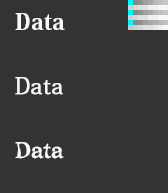
<style>
.page{position:relative;width:168px;height:193px;background:#333333}
.page>*{position:absolute;margin:0}
.t1{font:22px/64px "KozMinPro-Heavy";letter-spacing:0.022em;color:#f8f8f8}
.t2{font:22px/64px "AdobeFangsongStd-Regular";letter-spacing:0.028em;color:#f8f8f8;font-weight:bold}
.t3{font:22px/64px "ComicMysteryStd-DB";letter-spacing:-0.006em;color:#f8f8f8}
</style>
<div class="page">
<p class="t1" style="left:15px;top:13px;width:50px;height:146px">Data<br><span class="t2">Data<br></span><span class="t3">Data</span></p>
</div>
